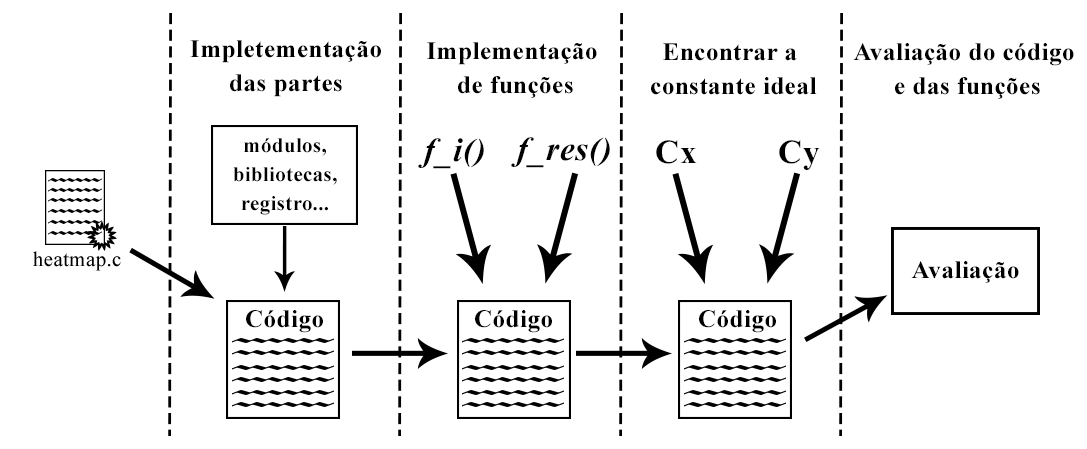
<style>
.page{position:relative;width:1087px;height:449px;background:#ffffff}
.page>*{position:absolute;margin:0}
.t1{font:25px "TimesNewRomanPS-BoldMT";letter-spacing:0.02em;color:#000000}
.t2{font:33.3px "TimesNewRomanPS-BoldItalicMT";letter-spacing:0.02em;color:#000000}
.t3{font:20.8px "TimesNewRomanPS-BoldMT";letter-spacing:0.02em;color:#000000}
.t4{font:33.3px "TimesNewRomanPS-BoldMT";letter-spacing:0.02em;color:#000000}
</style>
<div class="page">
<p class="t1" style="left:190px;top:40px;width:191px;height:57px;text-align:center">Impletementação<br>das partes</p>
<p class="t1" style="left:427px;top:42px;width:170px;height:56px;text-align:center">Implementação<br> de funções</p>
<p class="t1" style="left:651px;top:43px;width:166px;height:52px;text-align:center">Encontrar a <br>constante ideal</p>
<p class="t1" style="left:853px;top:43px;width:221px;height:56px;text-align:center">Avaliação do código<br> e das funções</p>
<p class="t2" style="left:511px;top:137px;width:99px;height:31px">f_res()</p>
<p class="t3" style="left:233px;top:138px;width:104px;height:77px;text-align:center">módulos,<br>bibliotecas,<br>registro...</p>
<p class="t2" style="left:418px;top:138px;width:66px;height:31px">f_i()</p>
<p class="t4" style="left:656px;top:140px;width:164px;height:30px">Cx         Cy</p>
<p class="t1" style="left:911px;top:261px;width:108px;height:22px">Avaliação</p>
<p class="t1" style="left:246px;top:310px;width:77px;height:23px">Código</p>
<p class="t1" style="left:475px;top:310px;width:77px;height:23px">Código</p>
<p class="t1" style="left:699px;top:310px;width:77px;height:23px">Código</p>
</div>
